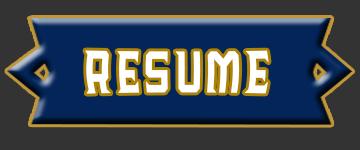
<style>
.page{position:relative;width:360px;height:150px;background:#333333}
.page>*{position:absolute;margin:0}
.t1{font:62.5px "Lorde-Havana";letter-spacing:0.1em;color:#ffffff;scale:0.75 1}
</style>
<div class="page">
<p class="t1" style="left:85px;top:50px;width:184px;height:44px">REsume</p>
</div>
